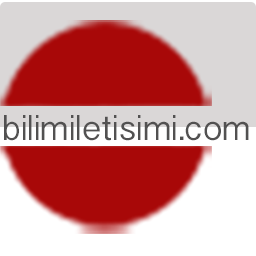
<style>
.page{position:relative;width:256px;height:256px;background:#a80808}
.page>*{position:absolute;margin:0}
.t1{font:33px "SinhalaSangamMN-Bold";color:#525151}
</style>
<div class="page">
<p class="t1" style="left:4px;top:115px;width:245px;height:26px">bilimiletisimi.com</p>
</div>
